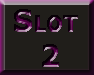
<style>
.page{position:relative;width:94px;height:75px;background:#201e1a}
.page>*{position:absolute;margin:0}
.t1{font:30px "Tahoma-Bold";font-variant:small-caps;font-weight:bold}
</style>
<div class="page">
<p class="t1" style="left:14px;top:9px;width:64px;height:58px;text-align:center">Slot <br>2</p>
</div>
